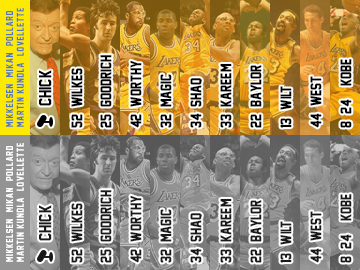
<style>
.page{position:relative;width:360px;height:270px}
.page>*{position:absolute;margin:0}
.t1{font:9px "JerseyM54";letter-spacing:0.08em;color:#5777b4}
.t2{font:14px "JerseyM54";color:#000000}
.t3{font:16px "JerseyM54";color:#000000}
</style>
<div class="page">
<p class="t1" style="left:6px;top:8px;width:18px;height:119px;rotate:-90deg">Mikkelsen  Mikan  Pollard<br>Martin Kundla  Lovellette</p>
<p class="t2" style="left:100px;top:55px;width:12px;height:73px;rotate:-90deg">25  Goodrich</p>
<p class="t2" style="left:130px;top:60px;width:12px;height:68px;rotate:-90deg">42  worthy</p>
<p class="t2" style="left:220px;top:63px;width:12px;height:65px;rotate:-90deg">33  Kareem</p>
<p class="t2" style="left:250px;top:65px;width:12px;height:63px;rotate:-90deg">22  Baylor</p>
<p class="t2" style="left:340px;top:59px;width:12px;height:69px;rotate:-90deg">8  24    Kobe</p>
<p class="t3" style="left:39px;top:70px;width:13px;height:36px;rotate:-90deg">CHICK</p>
<p class="t2" style="left:71px;top:68px;width:12px;height:60px;rotate:-90deg">52  wilkes</p>
<p class="t2" style="left:160px;top:74px;width:12px;height:54px;rotate:-90deg">32  Magic</p>
<p class="t2" style="left:190px;top:78px;width:12px;height:50px;rotate:-90deg">34  Shaq</p>
<p class="t2" style="left:310px;top:76px;width:12px;height:52px;rotate:-90deg">44  West</p>
<p class="t2" style="left:280px;top:86px;width:12px;height:42px;rotate:-90deg">13  !Wilt</p>
</div>
